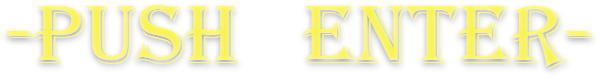
<style>
.page{position:relative;width:600px;height:80px;background:#ffffff}
.page>*{position:absolute;margin:0}
.t1{font:86.4px "Algerian";color:#faf56c}
</style>
<div class="page">
<p class="t1" style="left:7px;top:5px;width:586px;height:64px">-PUSH   ENTER-</p>
</div>
